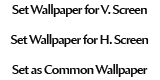
<style>
.page{position:relative;width:160px;height:80px;background:#ffffff}
.page>*{position:absolute;margin:0}
.t1{font:13.3px "AmiraParadiso";letter-spacing:-0.06em;color:#000000}
</style>
<div class="page">
<p class="t1" style="left:12px;top:4px;width:135px;height:13px;opacity:0.96">Set Wallpaper for V. Screen</p>
<p class="t1" style="left:10px;top:34px;width:139px;height:13px;opacity:0.96">Set Wallpaper for H. Screen</p>
<p class="t1" style="left:12px;top:64px;width:136px;height:13px;opacity:0.96">Set as Common Wallpaper</p>
</div>
